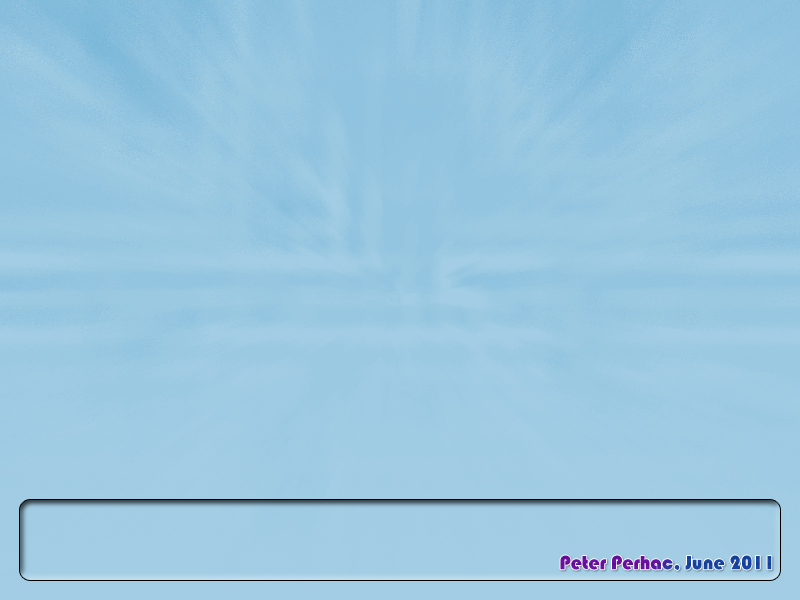
<style>
.page{position:relative;width:800px;height:600px}
.page>*{position:absolute;margin:0}
.t1{font:20px "Bauhaus93"}
</style>
<div class="page">
<p class="t1" style="left:560px;top:555px;width:212px;height:16px">Peter Perhac, June 2011</p>
</div>
